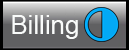
<style>
.page{position:relative;width:129px;height:50px;background:#606062}
.page>*{position:absolute;margin:0}
.t1{font:26px "ArialMT";color:#f9fbfa}
</style>
<div class="page">
<p class="t1" style="left:12px;top:15px;width:66px;height:24px">Billing</p>
</div>
